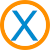
<style>
.page{position:relative;width:50px;height:50px;background:#ffffff}
.page>*{position:absolute;margin:0}
.t1{font:41.7px "ArialMT";color:#008acf}
</style>
<div class="page">
<p class="t1" style="left:10px;top:10px;width:28px;height:31px">X</p>
</div>
